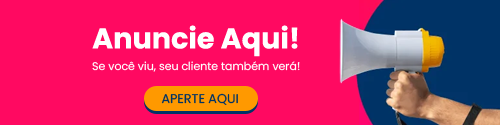
<style>
.page{position:relative;width:500px;height:125px;background:#ff0961}
.page>*{position:absolute;margin:0}
.t1{font:28.7px "Poppins-Bold";color:#ffffff}
.t2{font:11px "Poppins-Regular";color:#ffffff}
.t3{font:12.7px "Poppins-Regular";color:#003366;text-transform:uppercase}
</style>
<div class="page">
<p class="t1" style="left:92px;top:25px;width:206px;height:32px">Anuncie Aqui!</p>
<p class="t2" style="left:92px;top:61px;width:208px;height:11px">Se você viu, seu cliente também verá!</p>
<p class="t3" style="left:161px;top:93px;width:77px;height:12px">aperte aqui</p>
</div>
